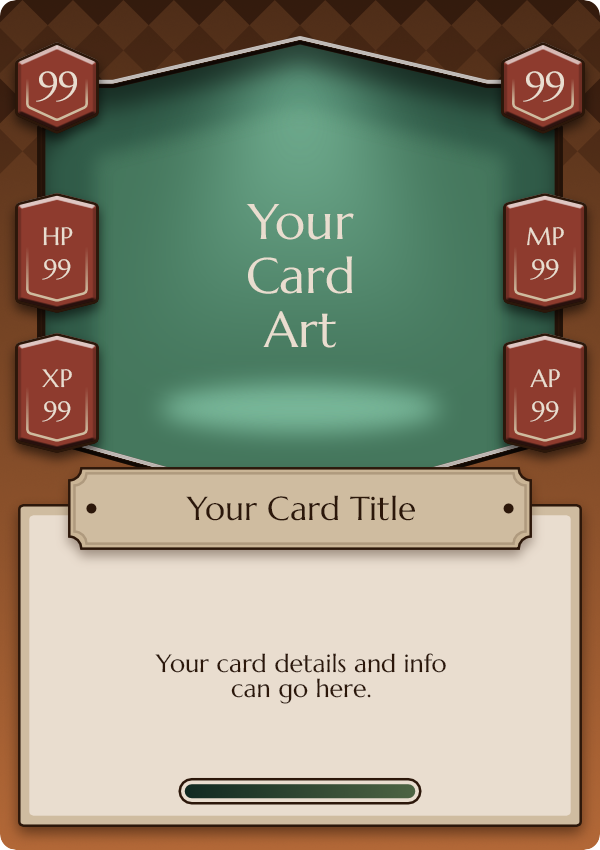
<style>
.page{position:relative;width:600px;height:850px;background:#e9ddcf}
.page>*{position:absolute;margin:0}
.t1{font:37.5px "Marcellus-Regular";color:#e9ddcf}
.t2{font:50px/54.2px "Marcellus-Regular";color:#e9ddcf}
.t3{font:25px "Marcellus-Regular";color:#e9ddcf}
.t4{font:33.3px "Marcellus-Regular";color:#2c170a}
.t5{font:25px/25px "Marcellus-Regular";color:#2c170a}
</style>
<div class="page">
<p class="t1" style="left:36px;top:71px;width:41px;height:31px">99</p>
<p class="t1" style="left:523px;top:71px;width:41px;height:31px">99</p>
<p class="t2" style="left:246px;top:204px;width:108px;height:144px;text-align:center">Your<br>Card<br>Art</p>
<p class="t3" style="left:43px;top:227px;width:30px;height:19px">HP</p>
<p class="t3" style="left:527px;top:227px;width:37px;height:19px">MP</p>
<p class="t3" style="left:42px;top:259px;width:29px;height:21px">99</p>
<p class="t3" style="left:530px;top:259px;width:29px;height:21px">99</p>
<p class="t3" style="left:42px;top:369px;width:30px;height:19px">XP</p>
<p class="t3" style="left:530px;top:369px;width:30px;height:19px">AP</p>
<p class="t3" style="left:42px;top:401px;width:29px;height:21px">99</p>
<p class="t3" style="left:530px;top:401px;width:29px;height:21px">99</p>
<p class="t4" style="left:186px;top:495px;width:229px;height:26px">Your Card Title</p>
<p class="t5" style="left:155px;top:653px;width:291px;height:51px;text-align:center">Your card details and info<br>can go here.</p>
</div>
